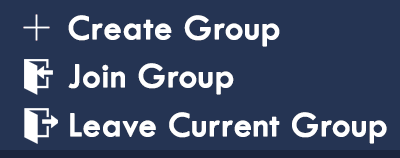
<style>
.page{position:relative;width:400px;height:158px;background:#253453}
.page>*{position:absolute;margin:0}
.t1{font:36px "TwCenMT-Regular";color:#ffffff;font-weight:bold}
</style>
<div class="page">
<p class="t1" style="left:68px;top:15px;width:212px;height:32px">Create Group</p>
<p class="t1" style="left:68px;top:63px;width:166px;height:32px">Join Group</p>
<p class="t1" style="left:70px;top:112px;width:317px;height:32px">Leave Current Group</p>
</div>
